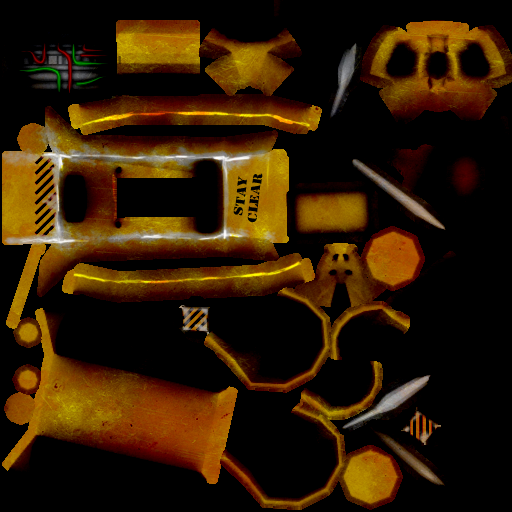
<style>
.page{position:relative;width:512px;height:512px;background:#000000}
.page>*{position:absolute;margin:0}
.t1{font:11.7px "StencilStd";color:#000000;scale:1.24 1}
</style>
<div class="page">
<p class="t1" style="left:233px;top:173px;width:30px;height:50px;text-align:center;rotate:-82deg">Stay<br>Clear</p>
</div>
